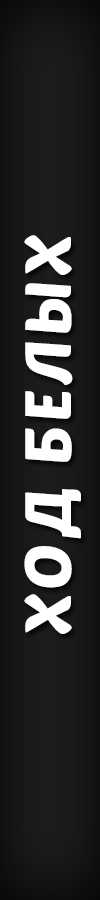
<style>
.page{position:relative;width:100px;height:900px}
.page>*{position:absolute;margin:0}
.t1{font:64.5px "PoetsenOne-Regular";letter-spacing:0.06em;color:#ffffff;text-transform:uppercase}
</style>
<div class="page">
<p class="t1" style="left:24px;top:235px;width:57px;height:399px;rotate:-90deg">ход белых</p>
</div>
